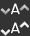
<style>
.page{position:relative;width:30px;height:36px;background:#333333}
.page>*{position:absolute;margin:0}
.t1{font:14px "MgOpenModata";color:#f9faf9;font-weight:bold}
</style>
<div class="page">
<p class="t1" style="left:11px;top:3px;width:9px;height:12px">A</p>
<p class="t1" style="left:11px;top:22px;width:9px;height:12px">A</p>
</div>
